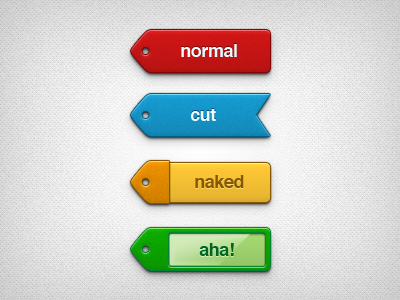
<style>
.page{position:relative;width:400px;height:300px}
.page>*{position:absolute;margin:0}
.t1{font:18px "Helvetica-Bold";letter-spacing:-0.025em;color:#eafbff}
.t2{font:18px "Helvetica-Bold";letter-spacing:-0.025em;color:#845605}
.t3{font:18px "Helvetica-Bold";letter-spacing:-0.025em;color:#006627}
</style>
<div class="page">
<p class="t1" style="left:181px;top:44px;width:56px;height:13px">normal</p>
<p class="t1" style="left:191px;top:109px;width:25px;height:12px">cut</p>
<p class="t2" style="left:195px;top:175px;width:49px;height:13px">naked</p>
<p class="t3" style="left:199px;top:243px;width:35px;height:13px">aha!</p>
</div>
